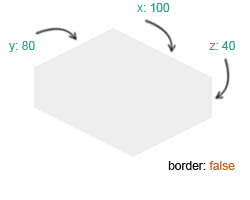
<style>
.page{position:relative;width:250px;height:200px;background:#ffffff}
.page>*{position:absolute;margin:0}
.t1{font:12px "ArialMT";color:#329b90}
.t2{font:12px "ArialMT";color:#131313}
.t3{font:12px "ArialMT";color:#b76427}
</style>
<div class="page">
<p class="t1" style="left:137px;top:3px;width:33px;height:9px">x: 100</p>
<p class="t1" style="left:9px;top:41px;width:26px;height:11px">y: 80</p>
<p class="t1" style="left:209px;top:41px;width:26px;height:9px">z: 40</p>
<p class="t2" style="left:168px;top:161px;width:67px;height:9px">border: <span class="t3">false</span></p>
</div>
